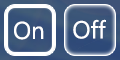
<style>
.page{position:relative;width:120px;height:60px}
.page>*{position:absolute;margin:0}
.t1{font:24.4px "SegoeUI";color:#ffffff}
</style>
<div class="page">
<p class="t1" style="left:14px;top:21px;width:30px;height:19px">On</p>
<p class="t1" style="left:73px;top:19px;width:33px;height:20px">Off</p>
</div>
